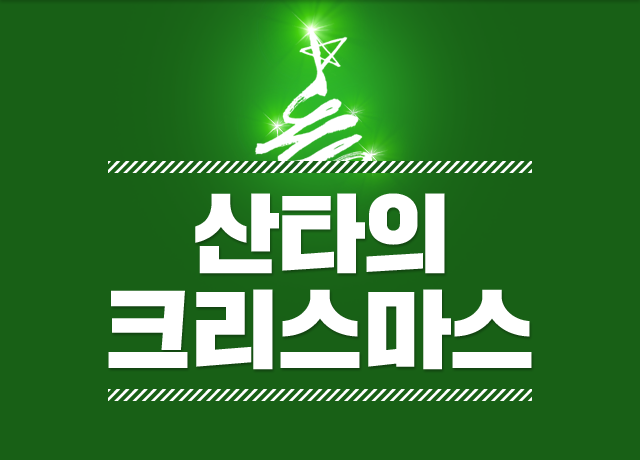
<style>
.page{position:relative;width:640px;height:460px;background:#186016}
.page>*{position:absolute;margin:0}
.t1{font:26px "AvenirNextLTPro-HeavyCn";letter-spacing:0.052em;font-weight:bold;font-style:italic;scale:0.88 1}
.t2{font:86px/96px "SDGdGothic";color:#ffffff}
</style>
<div class="page">
<p class="t1" style="left:11px;top:156px;width:609px;height:20px">/////////////////////////////////////////////////////////////////</p>
<p class="t2" style="left:108px;top:193px;width:424px;height:177px;text-align:center">산타의<br>크리스마스</p>
<p class="t1" style="left:11px;top:384px;width:609px;height:20px">/////////////////////////////////////////////////////////////////</p>
</div>
